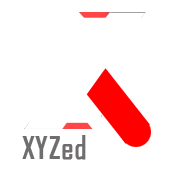
<style>
.page{position:relative;width:177px;height:177px;background:#ffffff}
.page>*{position:absolute;margin:0}
.t1{font:32px "BebasNeue-Regular";letter-spacing:0.02em;color:#6f6d6d}
.t2{font:32px "AgencyFB-Reg";letter-spacing:0.02em;color:#6f6d6d;font-weight:bold}
</style>
<div class="page">
<p class="t1" style="left:22px;top:135px;width:64px;height:25px">XYZ<span class="t2">ed</span></p>
</div>
